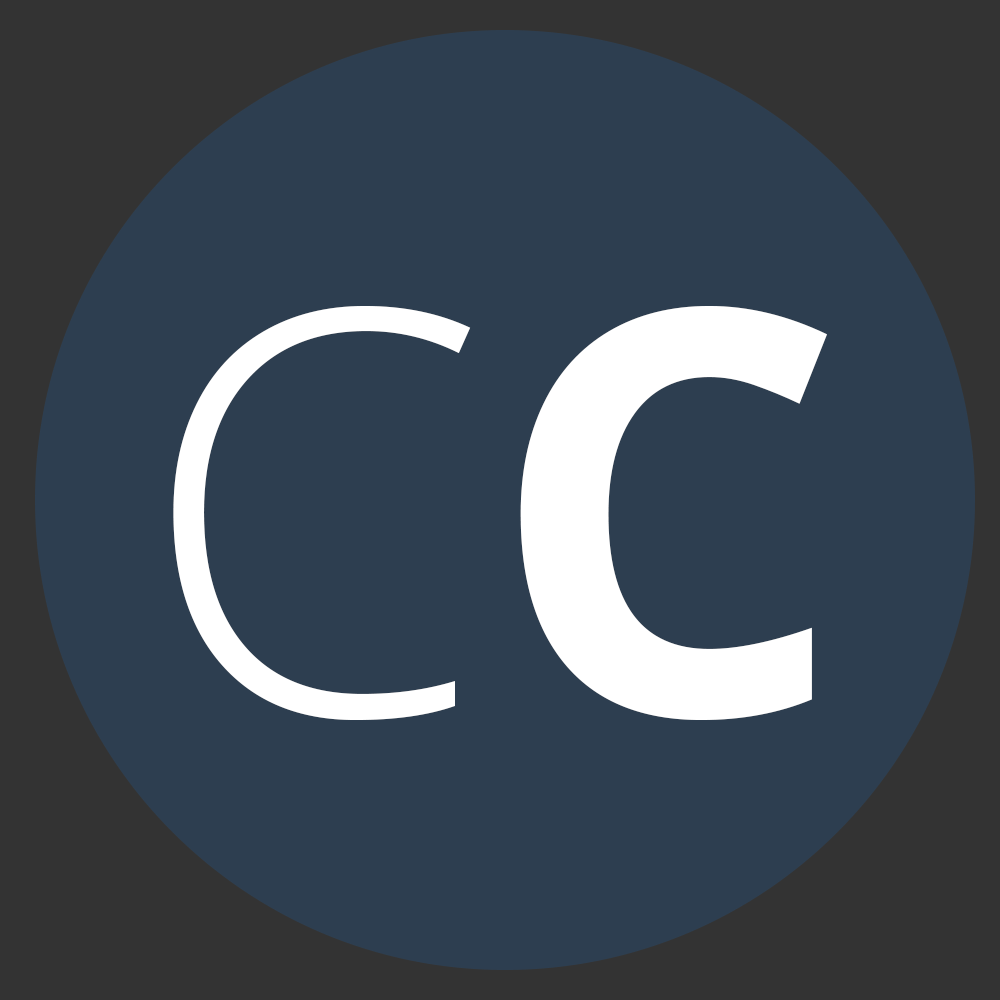
<style>
.page{position:relative;width:1000px;height:1000px;background:#2d3e50}
.page>*{position:absolute;margin:0}
.t1{font:562.8px "OpenSans-Light";color:#ffffff;text-transform:uppercase}
.t2{font:562.8px "OpenSans-Bold";color:#ffffff;text-transform:uppercase}
</style>
<div class="page">
<p class="t1" style="left:173px;top:306px;width:654px;height:414px">C<span class="t2">C</span></p>
</div>
